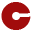
<style>
.page{position:relative;width:32px;height:32px;background:#a10c0c}
.page>*{position:absolute;margin:0}
.t1{font:56.6px "Bauhaus93";color:#a10c0c}
</style>
<div class="page">
<p class="t1" style="left:1px;top:2px;width:30px;height:28px">c</p>
</div>
